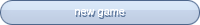
<style>
.page{position:relative;width:200px;height:25px}
.page>*{position:absolute;margin:0}
.t1{font:11px "Helvetica";color:#ffffff}
.t2{font:11px "Helvetica"}
</style>
<div class="page">
<p class="t1" style="left:75px;top:9px;width:50px;height:8px">new game</p>
<p class="t2" style="left:76px;top:11px;width:50px;height:8px">new game</p>
</div>
